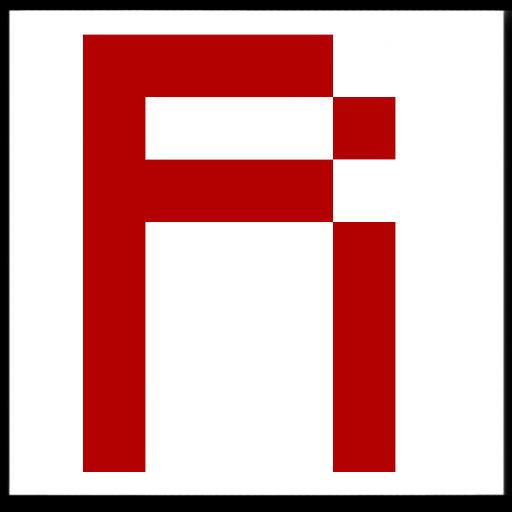
<style>
.page{position:relative;width:512px;height:512px;background:#ffffff}
.page>*{position:absolute;margin:0}
.t1{font:500px "Minecraft";color:#b30000}
</style>
<div class="page">
<p class="t1" style="left:83px;top:34px;width:313px;height:438px">R</p>
</div>
